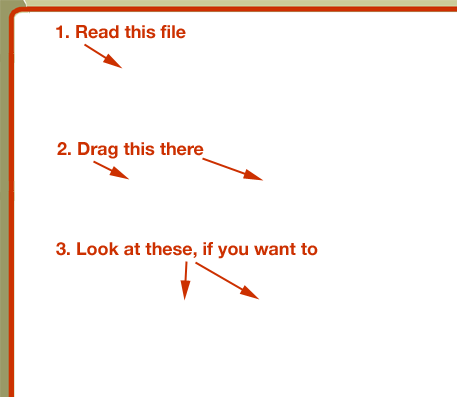
<style>
.page{position:relative;width:457px;height:397px;background:#ffffff}
.page>*{position:absolute;margin:0}
.t1{font:17.9px "HelveticaNeue-Bold";color:#cc3000}
</style>
<div class="page">
<p class="t1" style="left:56px;top:25px;width:130px;height:14px">1. Read this file</p>
<p class="t1" style="left:57px;top:142px;width:147px;height:17px">2. Drag this there</p>
<p class="t1" style="left:56px;top:242px;width:262px;height:17px">3. Look at these, if you want to</p>
</div>
